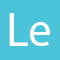
<style>
.page{position:relative;width:60px;height:60px;background:#4bc4d9}
.page>*{position:absolute;margin:0}
.t1{font:48px "MyriadPro-Regular";color:#ffffff}
</style>
<div class="page">
<p class="t1" style="left:9px;top:13px;width:41px;height:33px">Le</p>
</div>
